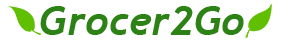
<style>
.page{position:relative;width:300px;height:45px;background:#ffffff}
.page>*{position:absolute;margin:0}
.t1{font:41.2px "Trebuchet-BoldItalic";color:#2c8215}
</style>
<div class="page">
<p class="t1" style="left:40px;top:6px;width:204px;height:29px">Grocer2Go</p>
</div>
